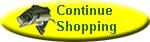
<style>
.page{position:relative;width:150px;height:42px;background:#ffff00}
.page>*{position:absolute;margin:0}
.t1{font:13.3px "Arial-BoldMT";color:#2e6c3b}
</style>
<div class="page">
<p class="t1" style="left:57px;top:5px;width:59px;height:29px">Continue<br>Shopping</p>
</div>
